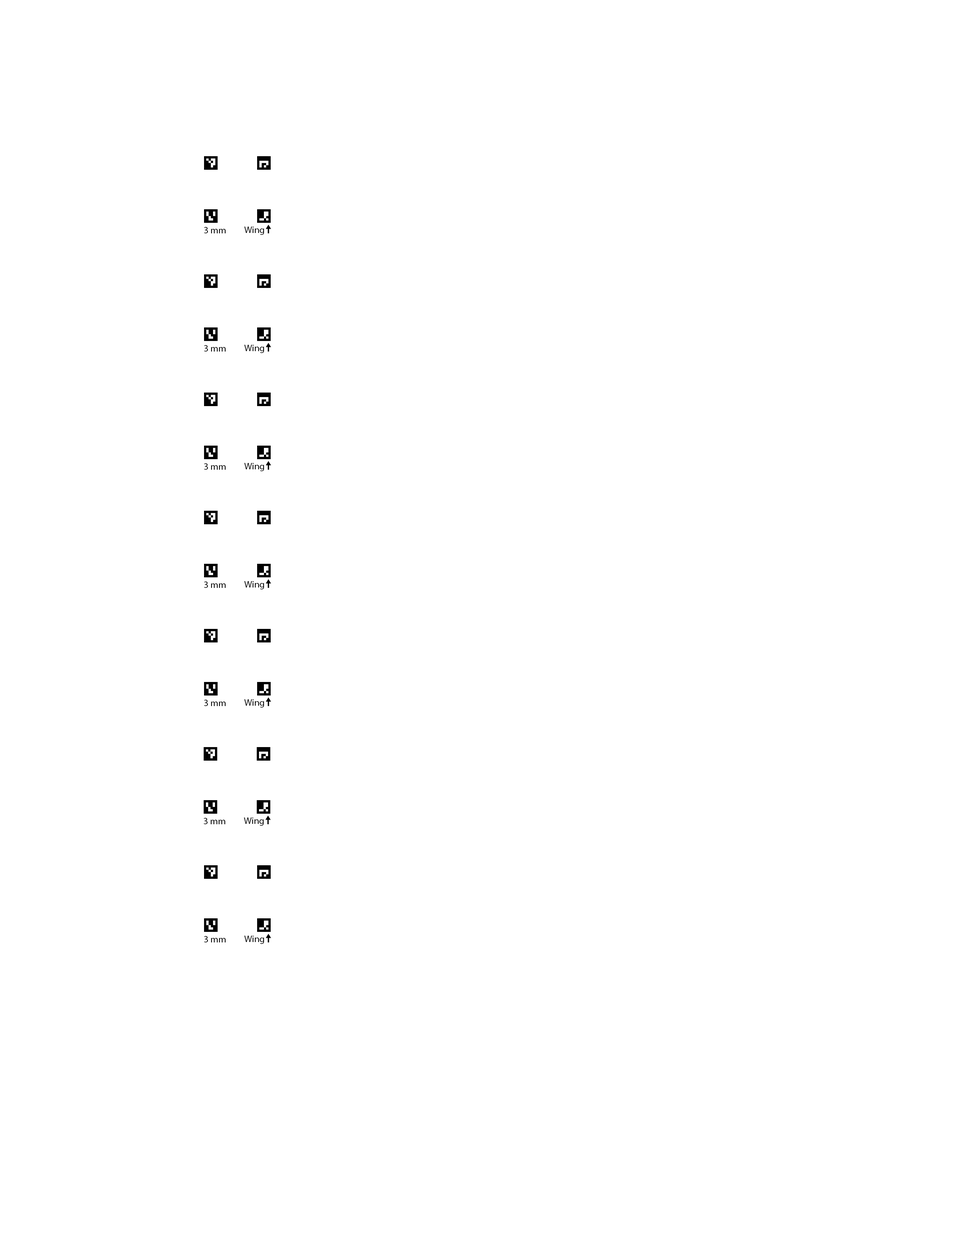
<style>
.page{position:relative;width:960px;height:1242px;background:#ffffff}
.page>*{position:absolute;margin:0}
.t1{font:9.4px "MyriadPro-Regular";color:#000000}
</style>
<div class="page">
<p class="t1" style="left:204px;top:227px;width:22px;height:6px">3 mm</p>
<p class="t1" style="left:244px;top:227px;width:20px;height:8px">Wing</p>
<p class="t1" style="left:204px;top:345px;width:22px;height:7px">3 mm</p>
<p class="t1" style="left:244px;top:345px;width:20px;height:8px">Wing</p>
<p class="t1" style="left:204px;top:463px;width:22px;height:7px">3 mm</p>
<p class="t1" style="left:244px;top:463px;width:20px;height:8px">Wing</p>
<p class="t1" style="left:204px;top:582px;width:22px;height:6px">3 mm</p>
<p class="t1" style="left:244px;top:581px;width:20px;height:8px">Wing</p>
<p class="t1" style="left:204px;top:700px;width:22px;height:6px">3 mm</p>
<p class="t1" style="left:244px;top:699px;width:20px;height:9px">Wing</p>
<p class="t1" style="left:204px;top:818px;width:21px;height:6px">3 mm</p>
<p class="t1" style="left:244px;top:818px;width:20px;height:8px">Wing</p>
<p class="t1" style="left:204px;top:936px;width:22px;height:7px">3 mm</p>
<p class="t1" style="left:244px;top:936px;width:20px;height:8px">Wing</p>
</div>
